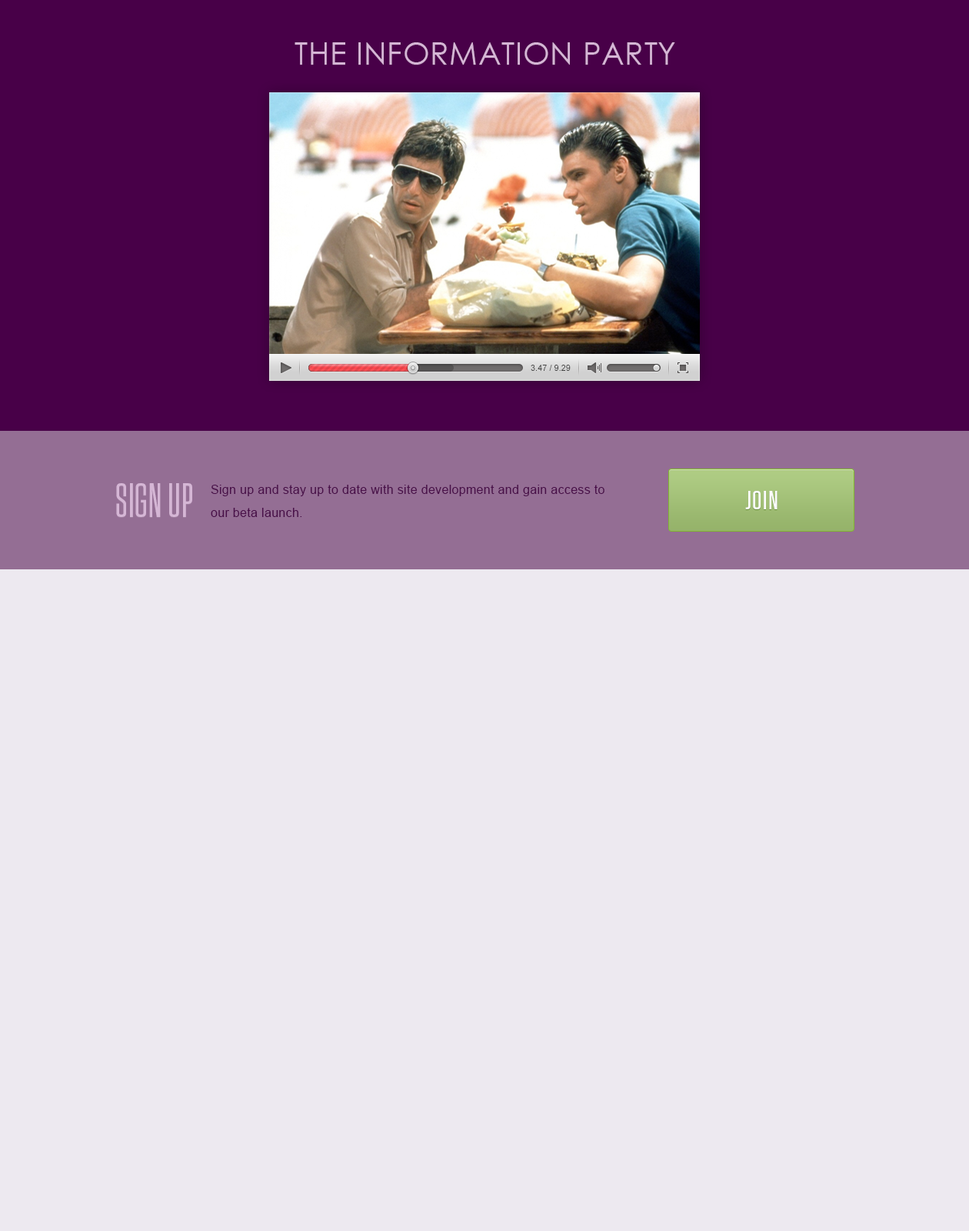
<style>
.page{position:relative;width:969px;height:1231px;background:#ede9f0}
.page>*{position:absolute;margin:0}
.t1{font:30.8px "CenturyGothic";letter-spacing:0.02em;color:#d5b6d5;text-transform:uppercase}
.t2{font:8.5px "ArialMT";color:#444444}
.t3{font:47.7px "TungstenCondensed-Medium";letter-spacing:0.02em;color:#d5b6d5;text-transform:uppercase}
.t4{font:12.3px/23.1px "ArialMT";letter-spacing:0.02em;color:#490f49}
.t5{font:26.1px "Tungsten-Medium";letter-spacing:0.04em;color:#fcfcfc;text-transform:uppercase}
</style>
<div class="page">
<p class="t1" style="left:295px;top:42px;width:380px;height:23px">the information party</p>
<p class="t2" style="left:531px;top:365px;width:40px;height:6px">3.47 / 9.29</p>
<p class="t3" style="left:116px;top:483px;width:76px;height:34px">sign up</p>
<p class="t4" style="left:211px;top:485px;width:393px;height:32px">Sign up and stay up to date with site development and gain access to our beta launch.</p>
<p class="t5" style="left:745px;top:491px;width:33px;height:18px">join</p>
</div>
